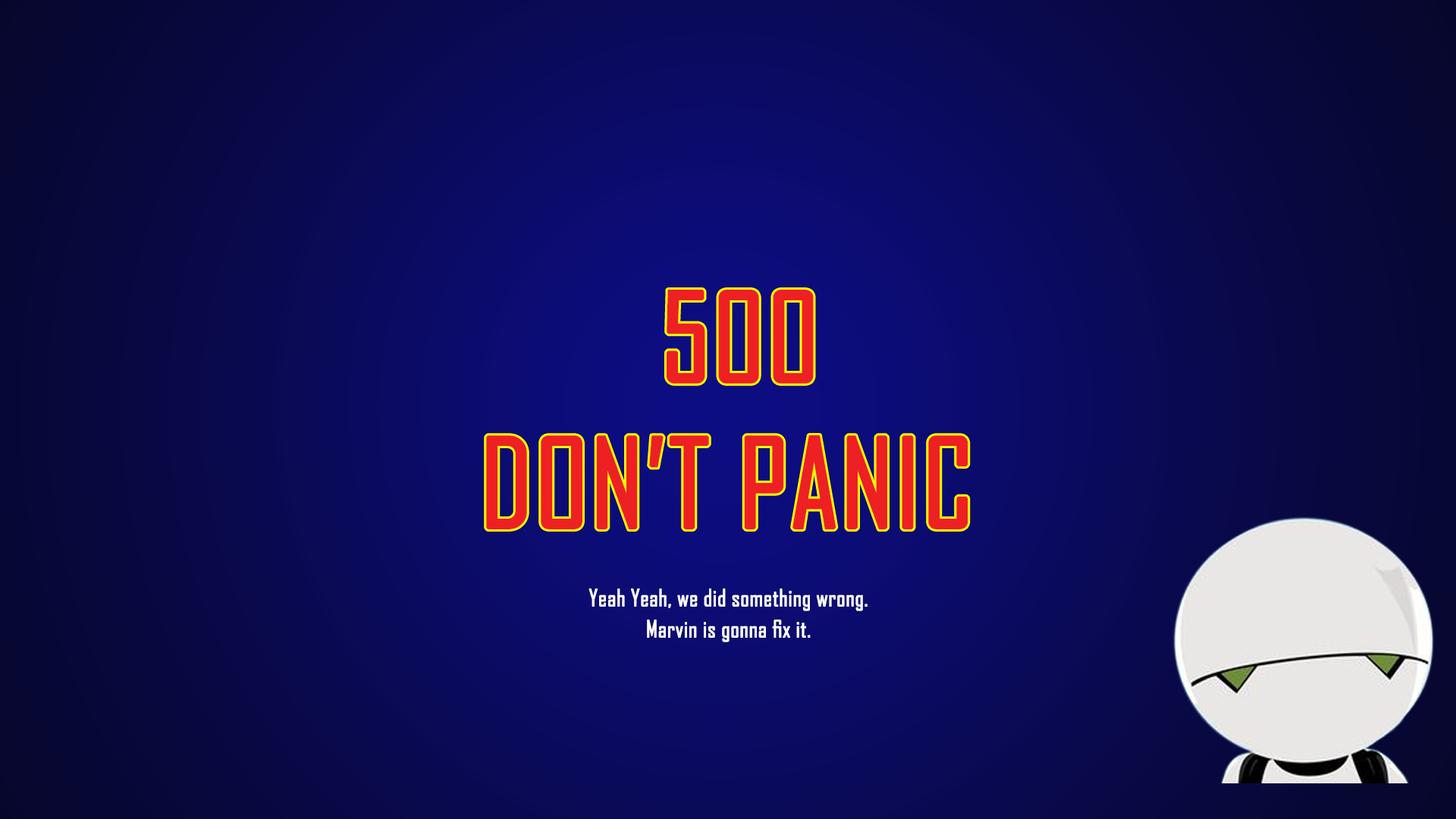
<style>
.page{position:relative;width:1456px;height:819px}
.page>*{position:absolute;margin:0}
.t1{font:118.3px "AgencyFB-Reg";color:#ed2024;font-weight:bold}
.t2{font:22.7px "AgencyFB-Reg";color:#ffffff;font-weight:bold}
</style>
<div class="page">
<p class="t1" style="left:486px;top:290px;width:482px;height:239px;text-align:center">500<br>DON’T PANIC</p>
<p class="t2" style="left:588px;top:588px;width:280px;height:54px;text-align:center">Yeah Yeah, we did something wrong.<br>Marvin is gonna fix it.</p>
</div>
